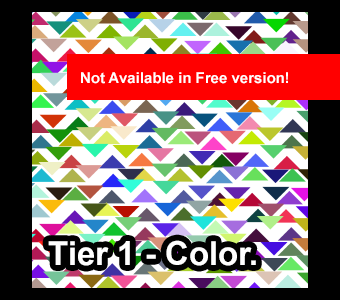
<style>
.page{position:relative;width:340px;height:300px;background:#ffffff}
.page>*{position:absolute;margin:0}
.t1{font:15px "Arial-BoldMT";color:#ffffff}
.t2{font:33px "Arial-BoldMT";color:#ffffff}
</style>
<div class="page">
<p class="t1" style="left:81px;top:72px;width:207px;height:12px">Not Available in Free version!</p>
<p class="t2" style="left:48px;top:240px;width:208px;height:26px">Tier 1 - Color.</p>
</div>
